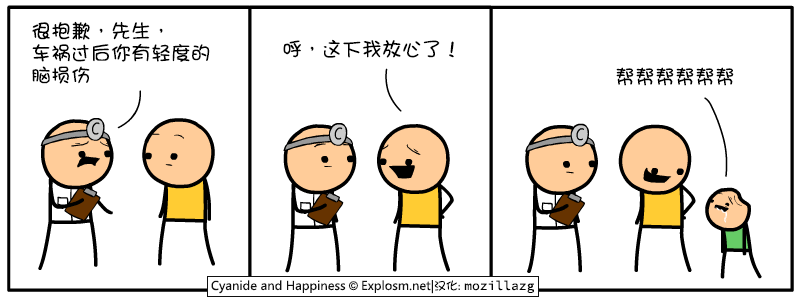
<style>
.page{position:relative;width:800px;height:300px;background:#ffffff}
.page>*{position:absolute;margin:0}
.t1{font:20px/22px "DFGirl";color:#000000}
.t2{font:20px "DFGirl";color:#000000}
</style>
<div class="page">
<p class="t1" style="left:32px;top:21px;width:178px;height:63px">很抱歉，先生，<br>车祸过后你有轻度的<br>脑损伤</p>
<p class="t2" style="left:283px;top:39px;width:171px;height:19px">呼，这下我放心了！</p>
<p class="t2" style="left:616px;top:67px;width:118px;height:19px">帮帮帮帮帮帮</p>
</div>
